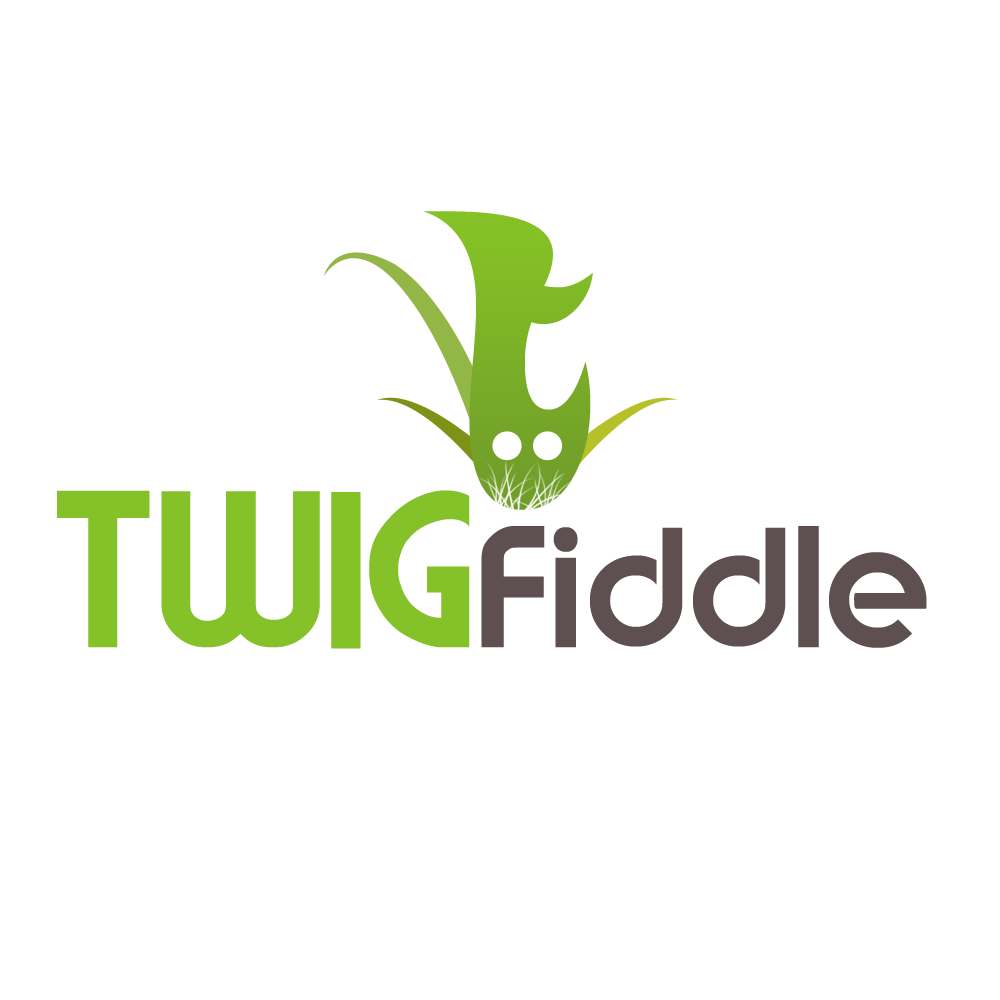
<style>
.page{position:relative;width:1000px;height:1000px;background:#ffffff}
.page>*{position:absolute;margin:0}
.t1{font:371.3px "HeavyHeap";letter-spacing:-0.075em;color:#7eb428}
.t2{font:145.1px "Brandish";color:#5e5051}
.t3{font:187.1px "Brandish";letter-spacing:-0.025em;color:#85c128}
</style>
<div class="page">
<p class="t1" style="left:423px;top:211px;width:170px;height:299px">T</p>
<p class="t2" style="left:57px;top:490px;width:870px;height:159px"><span class="t3">TWIG</span>Fiddle</p>
</div>
